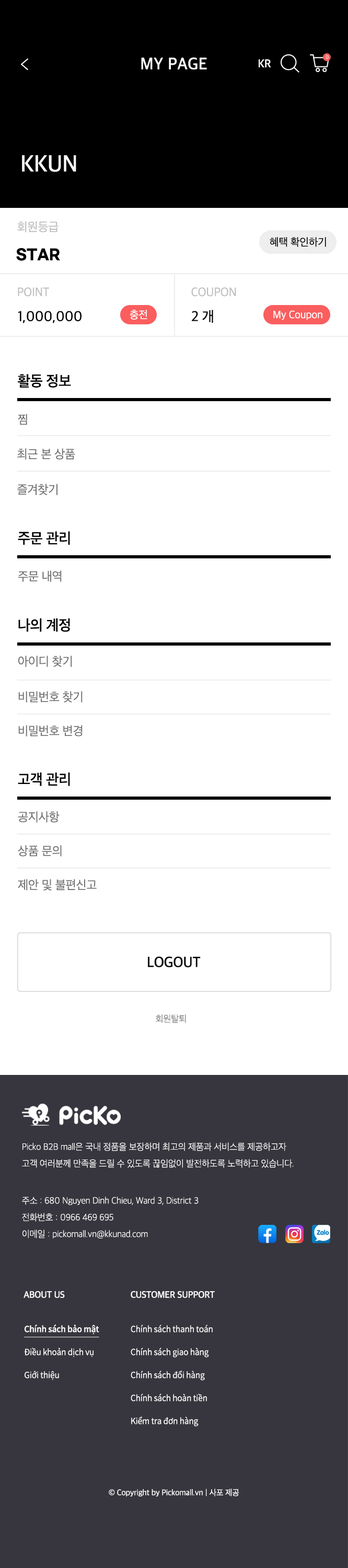
<style>
.page{position:relative;width:348px;height:1568px;background:#ffffff}
.page>*{position:absolute;margin:0}
.t1{font:16.7px "AppleSDGothicNeo-SemiBold";letter-spacing:0.017em;color:#ffffff}
.t2{font:11.5px "AppleSDGothicNeo-SemiBold";letter-spacing:-0.01em;color:#ffffff;text-transform:uppercase}
.t3{font:5.1px "AppleSDGothicNeo-UltraLight";letter-spacing:-0.01em;color:#ffffff}
.t4{font:23.4px "AppleSDGothicNeo-SemiBold";letter-spacing:-0.01em;color:#ffffff}
.t5{font:12.5px "AppleSDGothicNeo-Regular";letter-spacing:-0.01em;color:#bdbdbd;scale:0.97 1}
.t6{font:11px "AppleSDGothicNeo-Regular";letter-spacing:-0.01em;color:#000000}
.t7{font:14.6px "GmarketSansBold";letter-spacing:-0.01em;color:#020202;scale:0.97 1}
.t8{font:12.5px "AppleSDGothicNeo-Regular";letter-spacing:-0.01em;color:#bdbdbd;text-transform:uppercase;scale:0.97 1}
.t9{font:14.6px "AppleSDGothicNeo-Medium";letter-spacing:-0.01em;color:#020202;scale:0.97 1}
.t10{font:11px "AppleSDGothicNeo-Regular";letter-spacing:-0.01em;color:#ffffff}
.t11{font:14.9px "AppleSDGothicNeo-SemiBold";letter-spacing:-0.01em;color:#000000}
.t12{font:12.5px "AppleSDGothicNeo-Regular";letter-spacing:-0.01em;color:#727272}
.t13{font:14.9px "AppleSDGothicNeo-SemiBold";letter-spacing:-0.01em;color:#000000;text-transform:uppercase}
.t14{font:9.4px "AppleSDGothicNeo-UltraLight";letter-spacing:-0.01em;color:#727272}
.t15{font:9.4px/16.7px "AppleSDGothicNeo-UltraLight";letter-spacing:-0.01em;color:#ffffff;scale:0.97 1}
.t16{font:9.4px "AppleSDGothicNeo-SemiBold";letter-spacing:-0.01em;color:#ffffff;scale:0.97 1}
.t17{font:9.4px "AppleSDGothicNeo-SemiBold";letter-spacing:-0.01em;color:#ffffff;text-transform:uppercase;scale:0.97 1}
.t18{font:8.4px/23px "NotoSansCJKkr-DemiLight";letter-spacing:-0.01em;color:#ffffff;scale:0.97 1}
.t19{font:8.4px/23px "NotoSansCJKkr-Medium";letter-spacing:-0.01em;color:#ffffff;text-decoration:underline;scale:0.97 1}
.t20{font:8.4px "AppleSDGothicNeo-Regular";letter-spacing:-0.01em;color:#ffffff;scale:0.97 1}
</style>
<div class="page">
<p class="t1" style="left:141px;top:57px;width:66px;height:12px">MY PAGE</p>
<p class="t2" style="left:259px;top:59px;width:12px;height:8px">KR</p>
<p class="t3" style="left:325px;top:55px;width:4px;height:4px">0</p>
<p class="t4" style="left:22px;top:155px;width:54px;height:17px">KKUN</p>
<p class="t5" style="left:17px;top:221px;width:41px;height:11px">회원등급</p>
<p class="t6" style="left:270px;top:237px;width:56px;height:10px">혜택 확인하기</p>
<p class="t7" style="left:16px;top:248px;width:44px;height:13px">STAR</p>
<p class="t8" style="left:18px;top:287px;width:31px;height:10px">Point</p>
<p class="t8" style="left:191px;top:287px;width:45px;height:10px">Coupon</p>
<p class="t9" style="left:18px;top:311px;width:63px;height:12px">1,000,000</p>
<p class="t10" style="left:130px;top:310px;width:17px;height:10px">충전</p>
<p class="t9" style="left:192px;top:310px;width:21px;height:13px">2 개</p>
<p class="t10" style="left:273px;top:310px;width:49px;height:10px">My Coupon</p>
<p class="t11" style="left:18px;top:374px;width:53px;height:14px">활동 정보</p>
<p class="t12" style="left:18px;top:414px;width:9px;height:11px">찜</p>
<p class="t12" style="left:17px;top:448px;width:58px;height:12px">최근 본 상품</p>
<p class="t12" style="left:17px;top:484px;width:40px;height:11px">즐겨찾기</p>
<p class="t11" style="left:18px;top:531px;width:52px;height:14px">주문 관리</p>
<p class="t12" style="left:18px;top:570px;width:44px;height:12px">주문 내역</p>
<p class="t11" style="left:18px;top:618px;width:52px;height:14px">나의 계정</p>
<p class="t12" style="left:18px;top:656px;width:54px;height:11px">아이디 찾기</p>
<p class="t12" style="left:18px;top:691px;width:65px;height:12px">비밀번호 찾기</p>
<p class="t12" style="left:18px;top:725px;width:65px;height:11px">비밀번호 변경</p>
<p class="t11" style="left:18px;top:773px;width:52px;height:13px">고객 관리</p>
<p class="t12" style="left:18px;top:811px;width:42px;height:12px">공지사항</p>
<p class="t12" style="left:18px;top:845px;width:44px;height:12px">상품 문의</p>
<p class="t12" style="left:18px;top:879px;width:79px;height:12px">제안 및 불편신고</p>
<p class="t13" style="left:148px;top:956px;width:53px;height:11px">Logout</p>
<p class="t14" style="left:156px;top:1014px;width:30px;height:9px">회원탈퇴</p>
<p class="t15" style="left:22px;top:1142px;width:272px;height:26px">Picko B2B mall은 국내 정품을 보장하며 최고의 제품과 서비스를 제공하고자<br>고객 여러분께 만족을 드릴 수 있도록 끊임없이 발전하도록 노력하고 있습니다.</p>
<p class="t15" style="left:22px;top:1197px;width:176px;height:41px">주소 : 680 Nguyen Dinh Chieu, Ward 3, District 3<br>전화번호 : 0966 469 695<br>이메일 : pickomall.vn@kkunad.com</p>
<p class="t16" style="left:24px;top:1291px;width:41px;height:7px">ABOUT US</p>
<p class="t17" style="left:131px;top:1291px;width:84px;height:7px">Customer Support</p>
<p class="t18" style="left:24px;top:1324px;width:75px;height:56px"><span class="t19">Chính sách bảo mật<br></span>Điều khoản dịch vụ<br>Giới thiệu</p>
<p class="t18" style="left:131px;top:1325px;width:82px;height:101px">Chính sách thanh toán<br>Chính sách giao hàng<br>Chính sách đổi hàng<br>Chính sách hoàn tiền<br>Kiểm tra đơn hàng</p>
<p class="t20" style="left:109px;top:1489px;width:130px;height:7px">© Copyright by Pickomall.vn | 사포 제공</p>
</div>
